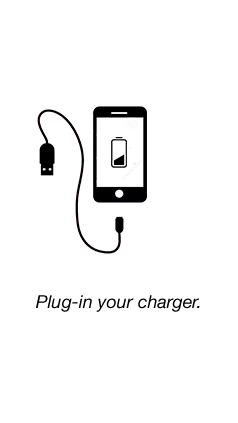
<style>
.page{position:relative;width:238px;height:423px;background:#ffffff}
.page>*{position:absolute;margin:0}
.t1{font:18px "HelveticaNeue-Italic";color:#000000}
</style>
<div class="page">
<p class="t1" style="left:36px;top:295px;width:164px;height:17px">Plug-in your charger.</p>
</div>
